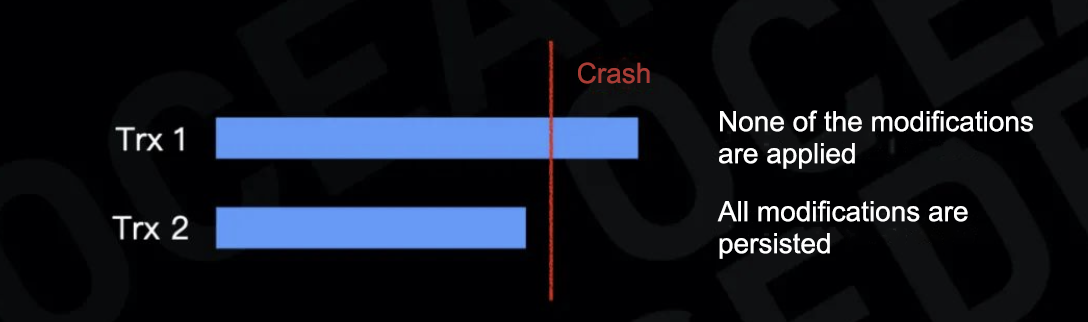
<style>
.page{position:relative;width:1088px;height:322px;background:#000002}
.page>*{position:absolute;margin:0}
.t1{font:28px "ArialMT";color:#a83d37}
.t2{font:28px/32px "ArialMT";color:#ffffff}
</style>
<div class="page">
<p class="t1" style="left:578px;top:62px;width:72px;height:22px">Crash</p>
<p class="t2" style="left:719px;top:110px;width:314px;height:59px">None of the modifications are applied</p>
<p class="t2" style="left:717px;top:200px;width:251px;height:59px">All modifications are persisted</p>
</div>
